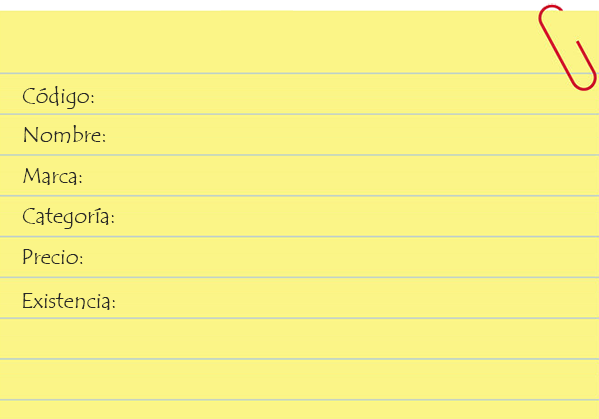
<style>
.page{position:relative;width:599px;height:419px;background:#fbf587}
.page>*{position:absolute;margin:0}
.t1{font:22px "TempusSansITC";color:#282828}
</style>
<div class="page">
<p class="t1" style="left:22px;top:86px;width:72px;height:23px">Código:</p>
<p class="t1" style="left:24px;top:125px;width:82px;height:18px">Nombre:</p>
<p class="t1" style="left:23px;top:168px;width:59px;height:17px">Marca:</p>
<p class="t1" style="left:22px;top:208px;width:92px;height:21px">Categoría:</p>
<p class="t1" style="left:23px;top:249px;width:60px;height:15px">Precio:</p>
<p class="t1" style="left:23px;top:293px;width:92px;height:17px">Existencia:</p>
</div>
